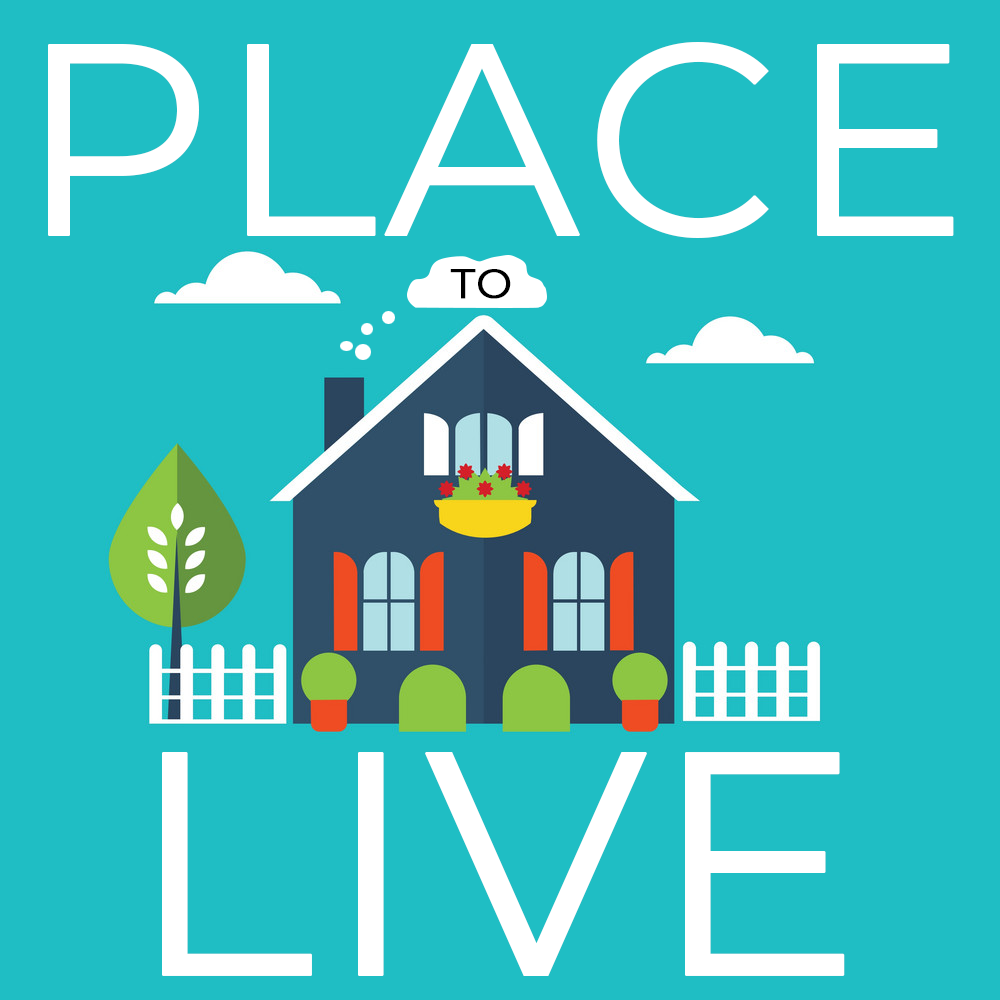
<style>
.page{position:relative;width:1000px;height:1000px;background:#1fbec4}
.page>*{position:absolute;margin:0}
.t1{font:271.6px "Montserrat-Regular";color:#ffffff;font-weight:bold}
.t2{font:41.4px "Montserrat-Regular";color:#000000;font-weight:bold}
.t3{font:317.5px "Montserrat-Regular";color:#ffffff;font-weight:bold}
</style>
<div class="page">
<p class="t1" style="left:48px;top:42px;width:906px;height:196px">PLACE</p>
<p class="t2" style="left:450px;top:269px;width:61px;height:30px">TO</p>
<p class="t3" style="left:162px;top:752px;width:683px;height:224px">LIVE</p>
</div>
